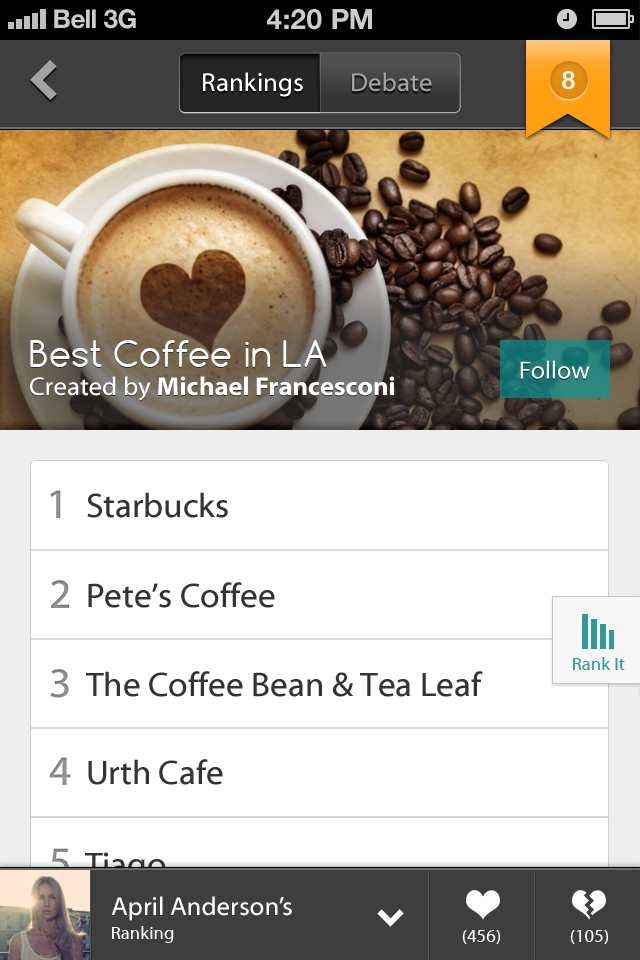
<style>
.page{position:relative;width:640px;height:960px;background:#ffffff}
.page>*{position:absolute;margin:0}
.t1{font:26px "HelveticaNeue-Bold";color:#cccccc}
.t2{font:26px "HelveticaNeue-Bold";color:#cccccc;text-transform:uppercase}
.t3{font:28px "HelveticaNeue-Bold";color:#cccccc;text-transform:uppercase}
.t4{font:26px "MyriadWebPro";color:#ffffff}
.t5{font:26px "MyriadWebPro";color:#a2a2a2}
.t6{font:25px "ArialRoundedMT-Bold";color:#ffffff}
.t7{font:35px "Comfortaa";letter-spacing:0.005em;color:#ffffff}
.t8{font:25px "MyriadWebPro";color:#ffffff}
.t9{font:26px "MyriadWebPro-Bold";color:#ffffff}
.t10{font:42px "MyriadWebPro";color:#919191}
.t11{font:34px "MyriadWebPro";color:#333333}
.t12{font:42px "MyriadWebPro";color:#8b8b8b}
.t13{font:18px "MyriadWebPro";letter-spacing:0.005em;color:#339999}
.t14{font:42px "MyriadWebPro";color:#8d8d8d}
.t15{font:42px "MyriadWebPro"}
.t16{font:18px "MyriadWebPro";letter-spacing:0.005em;color:#ffffff}
</style>
<div class="page">
<p class="t1" style="left:54px;top:9px;width:42px;height:20px">Bell</p>
<p class="t2" style="left:104px;top:9px;width:32px;height:20px">3G</p>
<p class="t3" style="left:267px;top:9px;width:105px;height:21px">4:20 pM</p>
<p class="t4" style="left:203px;top:72px;width:100px;height:25px">Rankings</p>
<p class="t5" style="left:352px;top:72px;width:80px;height:20px">Debate</p>
<p class="t6" style="left:562px;top:71px;width:13px;height:19px">8</p>
<p class="t7" style="left:30px;top:340px;width:297px;height:27px">Best Coffee in LA</p>
<p class="t8" style="left:520px;top:360px;width:70px;height:19px">Follow</p>
<p class="t9" style="left:30px;top:376px;width:365px;height:25px"><span class="t4">Created by </span>Michael Francesconi</p>
<p class="t10" style="left:50px;top:490px;width:11px;height:28px">1</p>
<p class="t11" style="left:87px;top:492px;width:141px;height:26px">Starbucks</p>
<p class="t12" style="left:51px;top:580px;width:18px;height:28px">2</p>
<p class="t11" style="left:88px;top:582px;width:187px;height:26px">Pete’s Coffee</p>
<p class="t13" style="left:573px;top:657px;width:52px;height:13px">Rank It</p>
<p class="t12" style="left:50px;top:669px;width:19px;height:29px">3</p>
<p class="t11" style="left:86px;top:671px;width:397px;height:26px">The Coffee Bean &amp; Tea Leaf</p>
<p class="t14" style="left:49px;top:757px;width:22px;height:28px">4</p>
<p class="t11" style="left:88px;top:759px;width:135px;height:26px">Urth Cafe</p>
<p class="t15" style="left:50px;top:848px;width:19px;height:29px">5</p>
<p class="t11" style="left:85px;top:852px;width:81px;height:32px">Tiago</p>
<p class="t4" style="left:111px;top:896px;width:181px;height:25px">April Anderson’s</p>
<p class="t16" style="left:112px;top:926px;width:62px;height:17px">Ranking</p>
<p class="t16" style="left:462px;top:930px;width:39px;height:14px">(456)</p>
<p class="t16" style="left:570px;top:930px;width:39px;height:14px">(105)</p>
</div>
